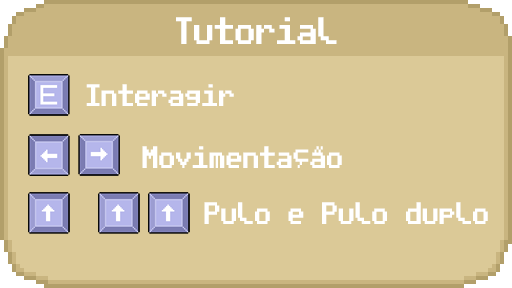
<style>
.page{position:relative;width:512px;height:288px;background:#dbc997}
.page>*{position:absolute;margin:0}
.t1{font:30.6px "PublicPixel";color:#ffffff;scale:0.68 1}
.t2{font:24.8px "PublicPixel";color:#ffffff;scale:0.68 1}
</style>
<div class="page">
<p class="t1" style="left:176px;top:17px;width:161px;height:27px">Tutorial</p>
<p class="t2" style="left:86px;top:84px;width:148px;height:22px">Interagir</p>
<p class="t2" style="left:142px;top:146px;width:200px;height:22px">Movimentação</p>
<p class="t2" style="left:204px;top:202px;width:284px;height:22px">Pulo e Pulo duplo</p>
</div>
